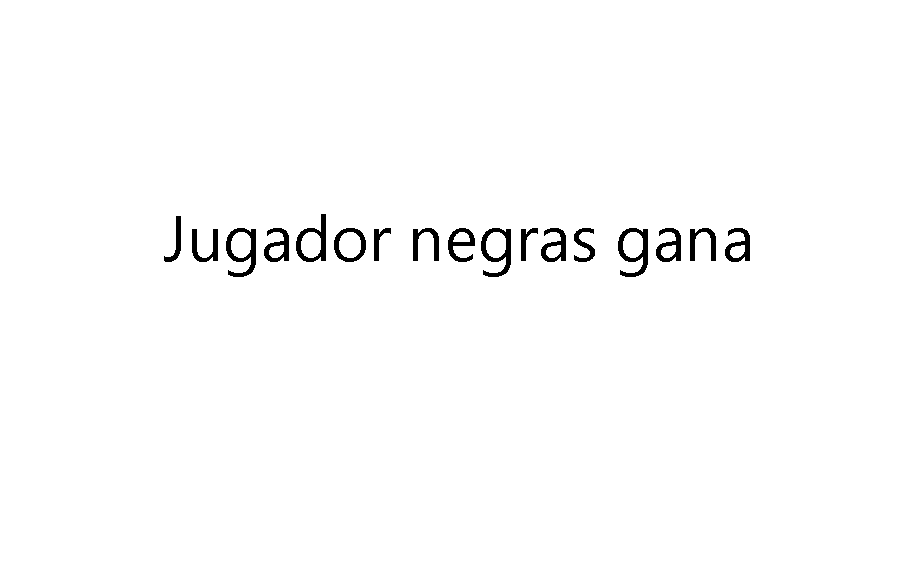
<style>
.page{position:relative;width:902px;height:563px;background:#ffffff}
.page>*{position:absolute;margin:0}
.t1{font:64px "MicrosoftNewTaiLue";color:#000000}
</style>
<div class="page">
<p class="t1" style="left:164px;top:214px;width:586px;height:63px">Jugador negras gana</p>
</div>
